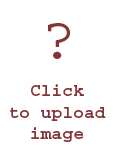
<style>
.page{position:relative;width:120px;height:160px;background:#ffffff}
.page>*{position:absolute;margin:0}
.t1{font:60px "Courier";color:#843434}
.t2{font:18px "Courier-Bold";color:#843434}
</style>
<div class="page">
<p class="t1" style="left:48px;top:23px;width:22px;height:36px">?</p>
<p class="t2" style="left:10px;top:84px;width:96px;height:58px;text-align:center">Click<br>to upload<br>image</p>
</div>
